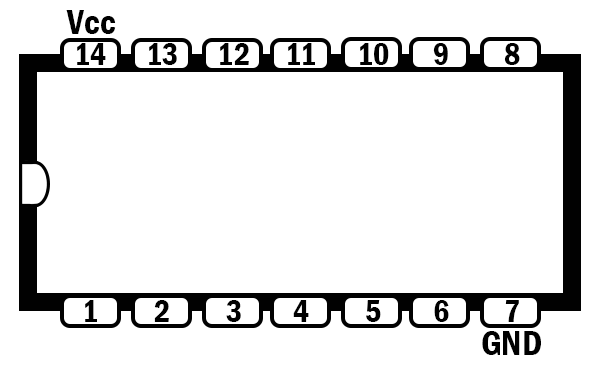
<style>
.page{position:relative;width:600px;height:372px;background:#ffffff}
.page>*{position:absolute;margin:0}
.t1{font:36px "FranklinGothic-DemiCond";color:#000000}
.t2{font:32px "FranklinGothic-DemiCond";color:#000000}
</style>
<div class="page">
<p class="t1" style="left:66px;top:10px;width:50px;height:24px">Vcc</p>
<p class="t2" style="left:77px;top:43px;width:29px;height:22px">14</p>
<p class="t2" style="left:149px;top:43px;width:28px;height:22px">13</p>
<p class="t2" style="left:220px;top:43px;width:29px;height:22px">12</p>
<p class="t2" style="left:288px;top:43px;width:27px;height:22px">11</p>
<p class="t2" style="left:360px;top:43px;width:29px;height:22px">10</p>
<p class="t2" style="left:433px;top:43px;width:15px;height:22px">9</p>
<p class="t2" style="left:504px;top:43px;width:16px;height:22px">8</p>
<p class="t2" style="left:85px;top:300px;width:12px;height:22px">1</p>
<p class="t2" style="left:154px;top:300px;width:15px;height:22px">2</p>
<p class="t2" style="left:226px;top:300px;width:15px;height:22px">3</p>
<p class="t2" style="left:293px;top:300px;width:16px;height:22px">4</p>
<p class="t2" style="left:366px;top:300px;width:15px;height:22px">5</p>
<p class="t2" style="left:434px;top:300px;width:15px;height:22px">6</p>
<p class="t2" style="left:505px;top:300px;width:14px;height:22px">7</p>
<p class="t1" style="left:482px;top:331px;width:59px;height:24px">GND</p>
</div>
